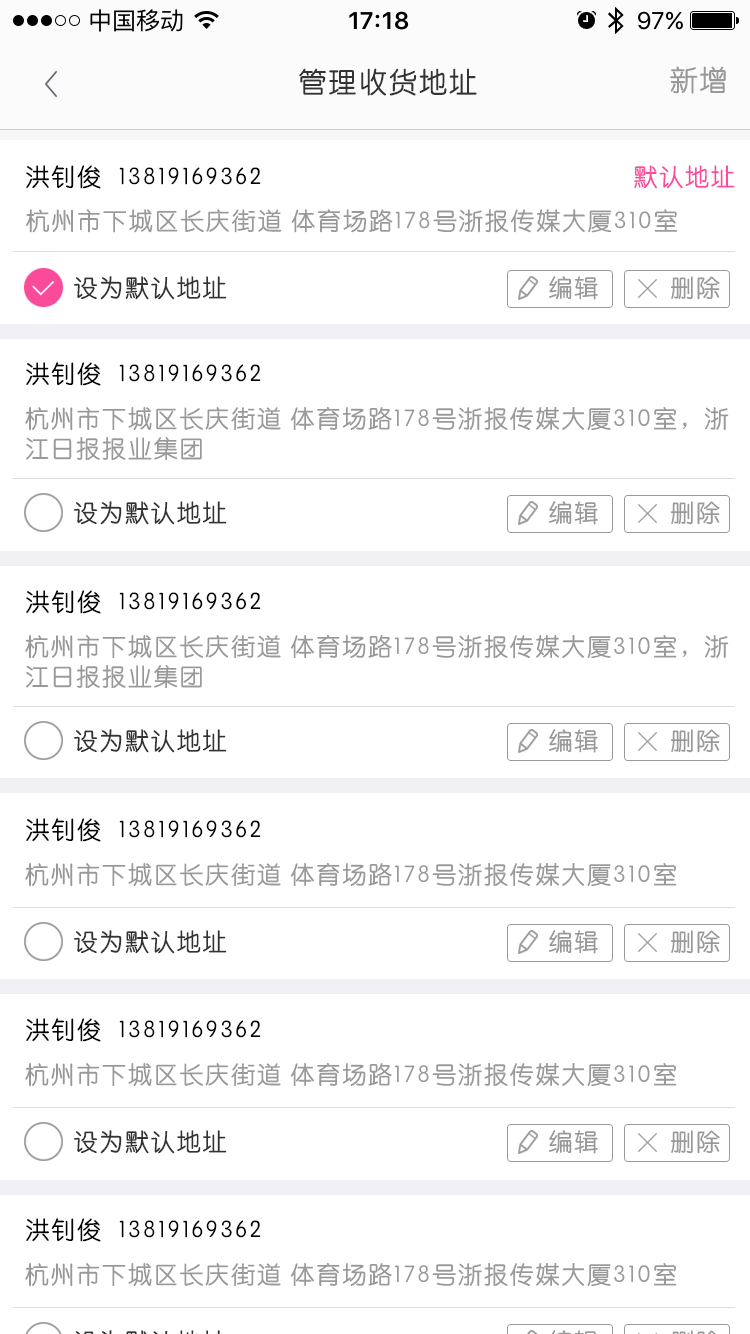
<style>
.page{position:relative;width:750px;height:1334px;background:#ffffff}
.page>*{position:absolute;margin:0}
.t1{font:28px "STYuanti-SC-Regular";letter-spacing:0.075em;color:#333333}
.t2{font:28px "STYuanti-SC-Regular";letter-spacing:0.075em;color:#999999}
.t3{font:24px/44px "STYuanti-SC-Regular";letter-spacing:0.075em;color:#999999}
.t4{font:24px/44px "STYuanti-SC-Regular";letter-spacing:0.075em;color:#000101}
.t5{font:24px "STYuanti-SC-Regular";letter-spacing:0.075em;color:#fb4b9c}
.t6{font:24px "STYuanti-SC-Regular";letter-spacing:0.075em;color:#333333}
.t7{font:24px "STYuanti-SC-Regular";letter-spacing:0.075em;color:#999999}
.t8{font:24px "STYuanti-SC-Regular";letter-spacing:0.075em;color:#000101}
.t9{font:24px/30px "STYuanti-SC-Regular";letter-spacing:0.075em;color:#999999}
</style>
<div class="page">
<p class="t1" style="left:299px;top:68px;width:178px;height:28px">管理收货地址</p>
<p class="t2" style="left:670px;top:66px;width:56px;height:28px">新增</p>
<p class="t3" style="left:26px;top:165px;width:651px;height:68px"><span class="t4">洪钊俊  13819169362<br></span>杭州市下城区长庆街道 体育场路178号浙报传媒大厦310室</p>
<p class="t5" style="left:634px;top:165px;width:101px;height:24px">默认地址</p>
<p class="t6" style="left:74px;top:276px;width:153px;height:24px">设为默认地址</p>
<p class="t7" style="left:549px;top:276px;width:49px;height:24px">编辑</p>
<p class="t7" style="left:671px;top:276px;width:49px;height:24px">删除</p>
<p class="t8" style="left:26px;top:362px;width:235px;height:24px">洪钊俊  13819169362</p>
<p class="t9" style="left:25px;top:407px;width:704px;height:53px">杭州市下城区长庆街道 体育场路178号浙报传媒大厦310室，浙<br>江日报报业集团</p>
<p class="t6" style="left:74px;top:501px;width:153px;height:24px">设为默认地址</p>
<p class="t7" style="left:549px;top:501px;width:49px;height:24px">编辑</p>
<p class="t7" style="left:671px;top:501px;width:49px;height:24px">删除</p>
<p class="t8" style="left:26px;top:590px;width:235px;height:24px">洪钊俊  13819169362</p>
<p class="t9" style="left:25px;top:635px;width:704px;height:53px">杭州市下城区长庆街道 体育场路178号浙报传媒大厦310室，浙<br>江日报报业集团</p>
<p class="t6" style="left:74px;top:729px;width:153px;height:24px">设为默认地址</p>
<p class="t7" style="left:549px;top:729px;width:49px;height:24px">编辑</p>
<p class="t7" style="left:671px;top:729px;width:49px;height:24px">删除</p>
<p class="t8" style="left:26px;top:818px;width:235px;height:24px">洪钊俊  13819169362</p>
<p class="t7" style="left:25px;top:863px;width:652px;height:23px">杭州市下城区长庆街道 体育场路178号浙报传媒大厦310室</p>
<p class="t6" style="left:74px;top:930px;width:153px;height:24px">设为默认地址</p>
<p class="t7" style="left:549px;top:930px;width:49px;height:24px">编辑</p>
<p class="t7" style="left:671px;top:930px;width:49px;height:24px">删除</p>
<p class="t8" style="left:26px;top:1018px;width:235px;height:24px">洪钊俊  13819169362</p>
<p class="t7" style="left:25px;top:1063px;width:652px;height:23px">杭州市下城区长庆街道 体育场路178号浙报传媒大厦310室</p>
<p class="t6" style="left:74px;top:1130px;width:153px;height:24px">设为默认地址</p>
<p class="t7" style="left:549px;top:1130px;width:49px;height:24px">编辑</p>
<p class="t7" style="left:671px;top:1130px;width:49px;height:24px">删除</p>
<p class="t8" style="left:26px;top:1218px;width:235px;height:24px">洪钊俊  13819169362</p>
<p class="t7" style="left:25px;top:1263px;width:652px;height:23px">杭州市下城区长庆街道 体育场路178号浙报传媒大厦310室</p>
</div>
